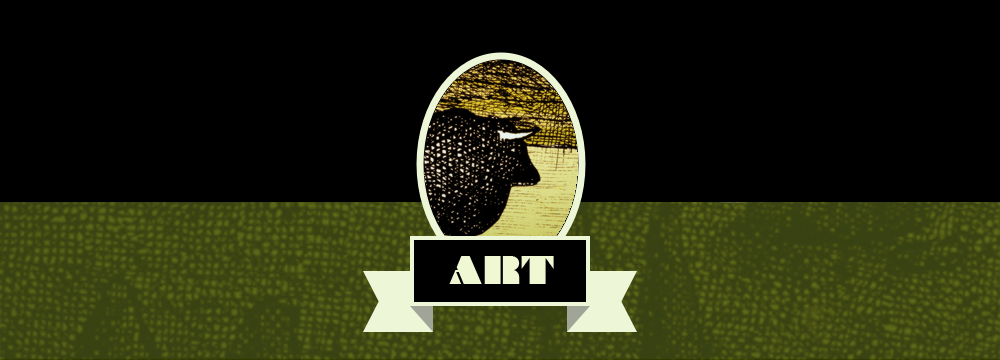
<style>
.page{position:relative;width:1000px;height:360px;background:#000000}
.page>*{position:absolute;margin:0}
.t1{font:36px "Braggadocio";color:#eff7d3}
</style>
<div class="page">
<p class="t1" style="left:449px;top:256px;width:105px;height:28px">ART</p>
</div>
